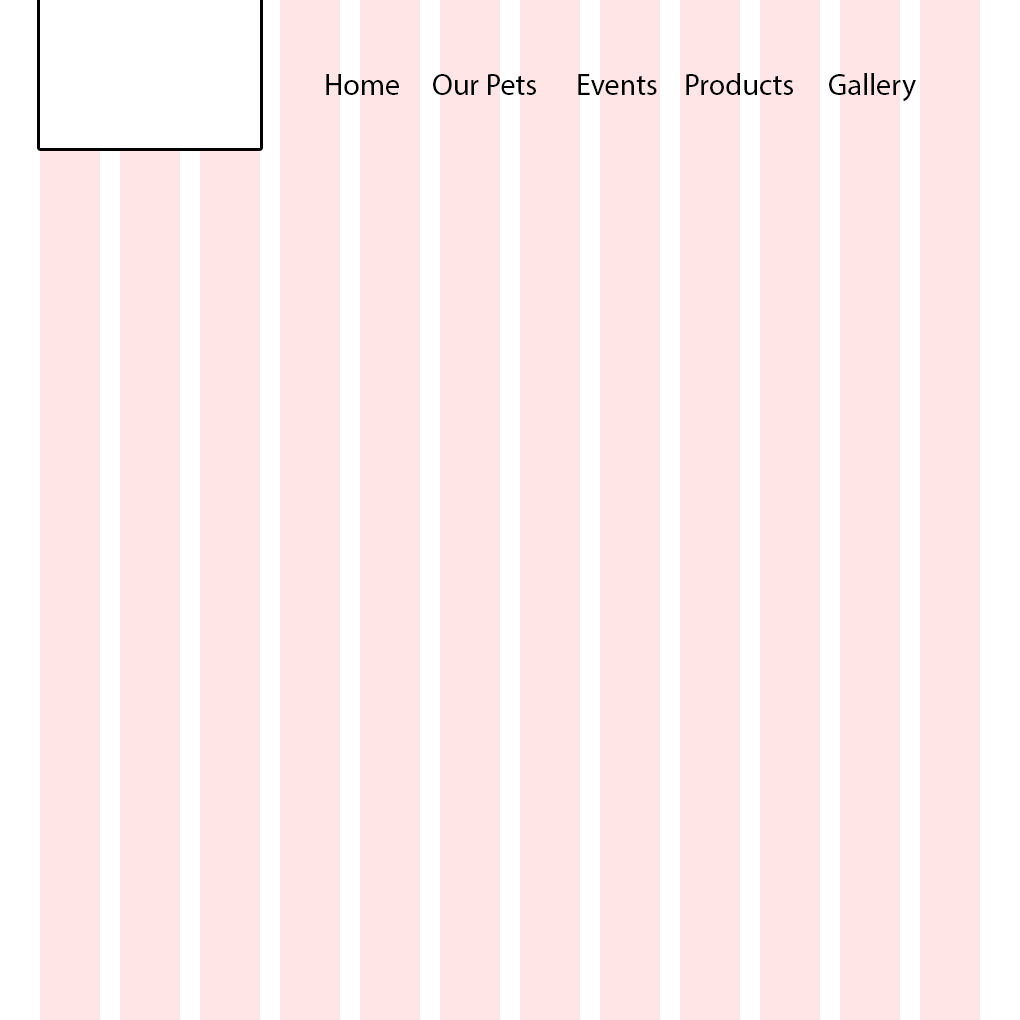
<style>
.page{position:relative;width:1020px;height:1020px;background:#ffe5e5}
.page>*{position:absolute;margin:0}
.t1{font:30px "MyriadPro-Regular";color:#000000}
</style>
<div class="page">
<p class="t1" style="left:326px;top:73px;width:590px;height:29px">Home Our Pets  Events Products Gallery</p>
</div>
